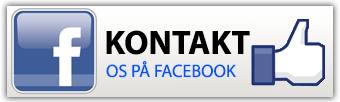
<style>
.page{position:relative;width:340px;height:102px}
.page>*{position:absolute;margin:0}
.t1{font:34px "MyriadPro-Bold";color:#000000}
.t2{font:18px "MyriadPro-Regular";color:#0055ff}
</style>
<div class="page">
<p class="t1" style="left:106px;top:30px;width:144px;height:25px">KONTAKT</p>
<p class="t2" style="left:106px;top:61px;width:130px;height:17px">OS PÅ FACEBOOK</p>
</div>
